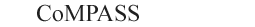
<style>
.page{position:relative;width:255px;height:27px;background:#ffffff}
.page>*{position:absolute;margin:0}
.t1{font:24px "TimesNewRomanPSMT";color:#202020}
</style>
<div class="page">
<p class="t1" style="left:37px;top:4px;width:102px;height:18px">CoMPASS</p>
</div>
